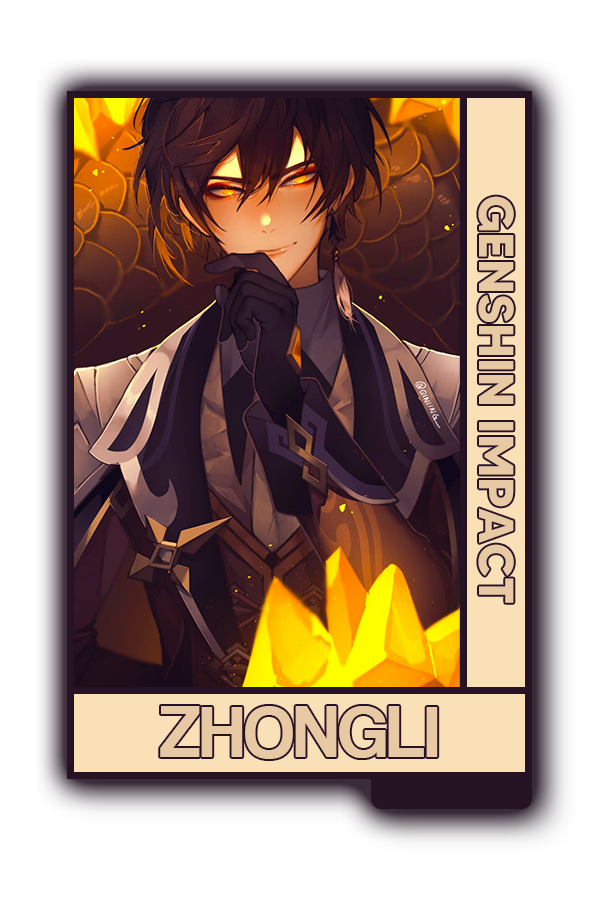
<style>
.page{position:relative;width:600px;height:900px;background:#ffffff}
.page>*{position:absolute;margin:0}
.t1{font:48.8px "MADETOMMY-Bold";color:#e6d4a9}
.t2{font:75px "CoolveticaRg-Regular";color:#e6d4a9}
</style>
<div class="page">
<p class="t1" style="left:478px;top:196px;width:36px;height:407px;rotate:90deg">GENSHIN IMPACT</p>
<p class="t2" style="left:160px;top:706px;width:278px;height:53px">ZHONGLI</p>
</div>
